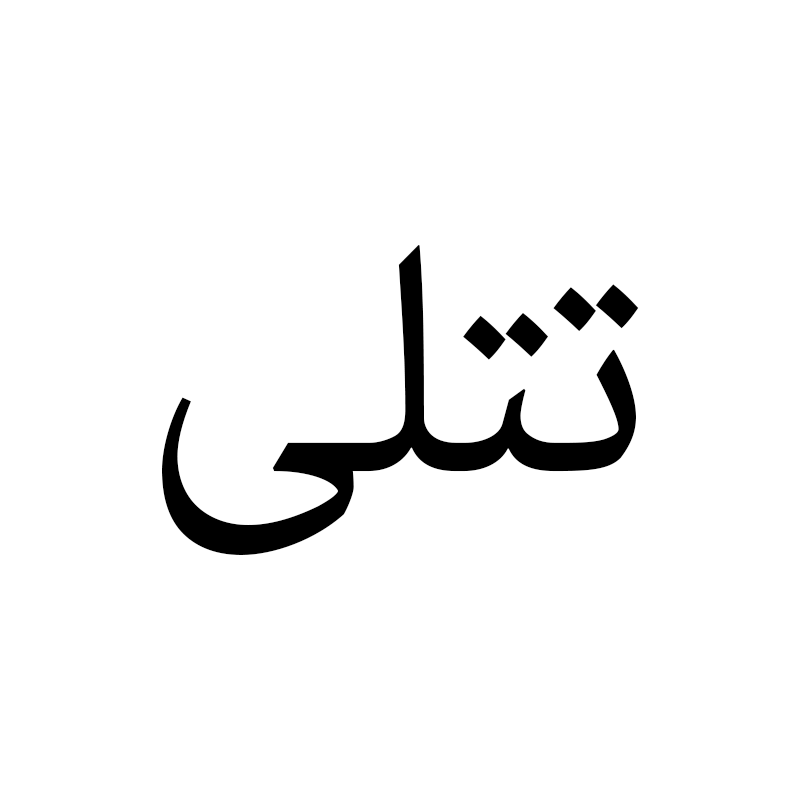
<style>
.page{position:relative;width:800px;height:800px;background:#ffffff}
.page>*{position:absolute;margin:0}
.t1{font:450px "AdobeArabic-Regular";color:#000000}
</style>
<div class="page">
<p class="t1" style="left:162px;top:245px;width:477px;height:310px">تتلی</p>
</div>
